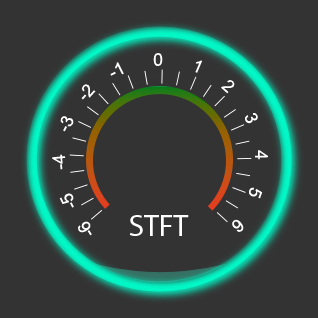
<style>
.page{position:relative;width:318px;height:318px;background:#333333}
.page>*{position:absolute;margin:0}
.t1{font:17.5px "ArialMT";color:#ffffff}
.t2{font:30px "MyriadPro-Regular";color:#ffffff}
</style>
<div class="page">
<p class="t1" style="left:153px;top:53px;width:10px;height:13px">0</p>
<p class="t1" style="left:110px;top:62px;width:14px;height:14px;rotate:-27deg">-1</p>
<p class="t1" style="left:195px;top:60px;width:7px;height:13px;rotate:23deg">1</p>
<p class="t1" style="left:81px;top:84px;width:15px;height:16px;rotate:-48deg">-2</p>
<p class="t1" style="left:221px;top:80px;width:14px;height:14px;rotate:42deg">2</p>
<p class="t1" style="left:245px;top:113px;width:13px;height:11px;rotate:69deg">3</p>
<p class="t1" style="left:60px;top:116px;width:14px;height:16px;rotate:-64deg">-3</p>
<p class="t1" style="left:255px;top:150px;width:13px;height:10px;rotate:89deg">4</p>
<p class="t1" style="left:52px;top:154px;width:14px;height:16px;rotate:-95deg">-4</p>
<p class="t1" style="left:59px;top:193px;width:15px;height:15px;rotate:-117deg">-5</p>
<p class="t1" style="left:249px;top:187px;width:14px;height:12px;rotate:109deg">5</p>
<p class="t1" style="left:78px;top:221px;width:14px;height:15px;rotate:-122deg">-6</p>
<p class="t2" style="left:129px;top:215px;width:60px;height:21px">STFT</p>
<p class="t1" style="left:232px;top:219px;width:12px;height:13px;rotate:141deg">6</p>
</div>
